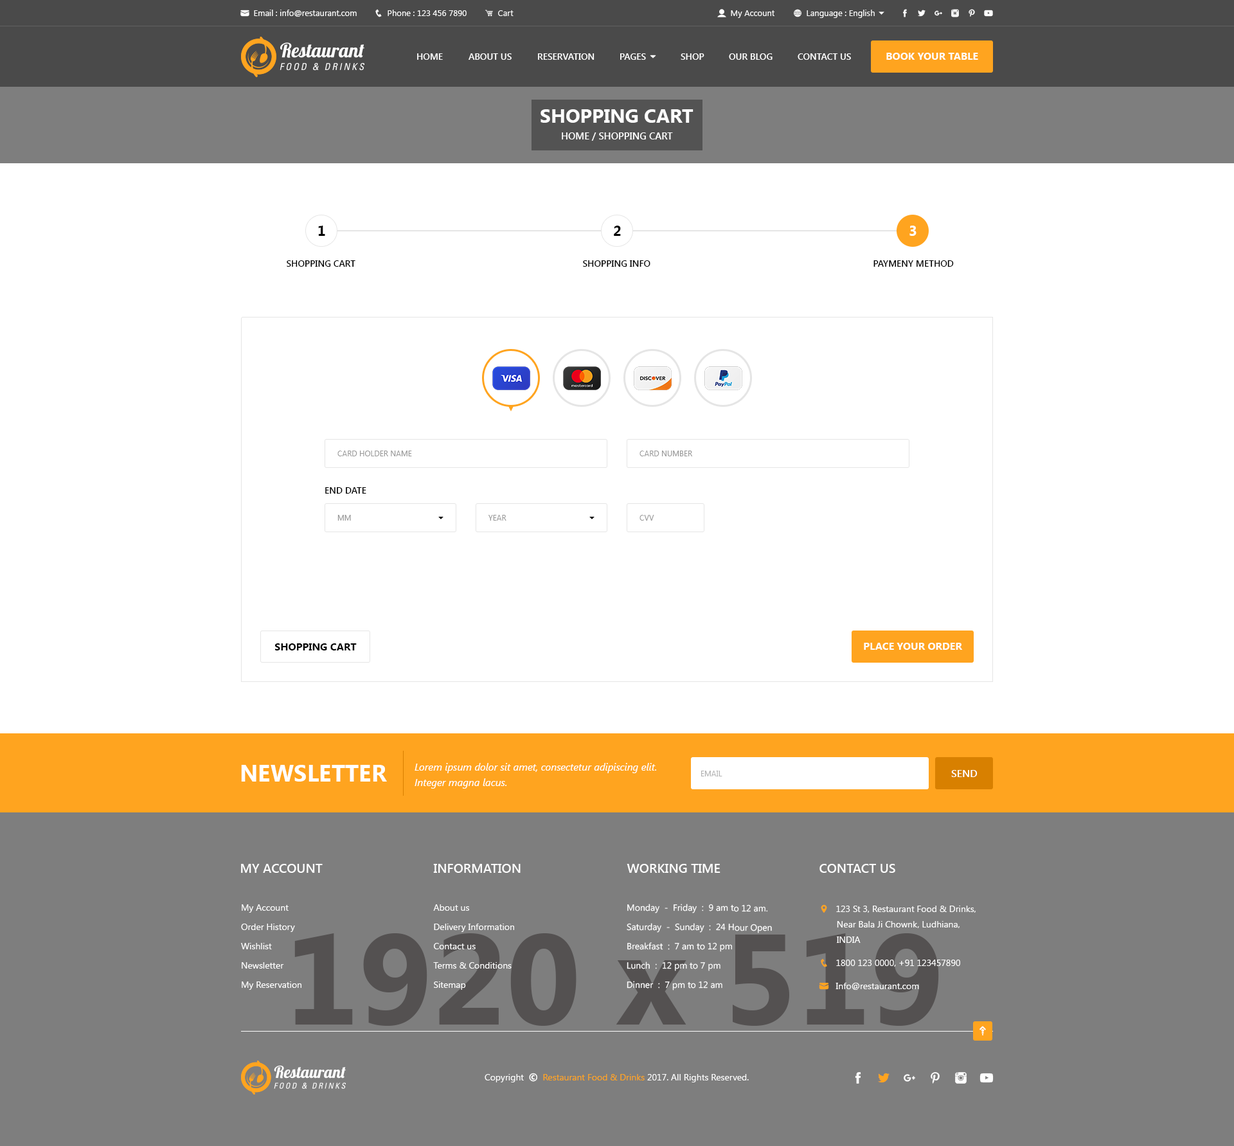
<style>
.page{position:relative;width:1234px;height:1146px;background:#ffffff}
.page>*{position:absolute;margin:0}
.t1{font:9px "SegoeUI-SemiBold";color:#ffffff}
.t2{font:10.3px "SegoeUI-Bold";color:#ffffff}
.t3{font:19.3px "SegoeUI-Bold";color:#ffffff}
.t4{font:9.6px "SegoeUI-SemiBold";color:#ffffff}
.t5{font:14.1px "SegoeUI-Bold";color:#000000}
.t6{font:14.1px "SegoeUI-Bold";color:#ffffff}
.t7{font:9px "SegoeUI-SemiBold";color:#000000}
.t8{font:7.7px "SegoeUI";color:#999999}
.t9{font:10.3px "SegoeUI-Bold";color:#000000}
.t10{font:23.1px "SegoeUI-Bold";color:#ffffff}
.t11{font:10.3px/15.4px "SegoeUI-Italic";color:#ffffff}
.t12{font:7.7px "SegoeUI";color:#b2b2b2;text-transform:uppercase}
.t13{font:10.3px "SegoeUI-SemiBold";color:#ffffff}
.t14{font:12.9px "SegoeUI-SemiBold";color:#ffffff}
.t15{font:9px/19.3px "SegoeUI";color:#ffffff}
.t16{font:128.6px "SegoeUI-Bold";color:#545151}
</style>
<div class="page">
<p class="t1" style="left:417px;top:53px;width:26px;height:7px">HOME</p>
<p class="t1" style="left:469px;top:53px;width:43px;height:7px">ABOUT US</p>
<p class="t1" style="left:538px;top:53px;width:57px;height:7px">RESERVATION</p>
<p class="t1" style="left:681px;top:53px;width:24px;height:7px">SHOP</p>
<p class="t1" style="left:729px;top:53px;width:44px;height:7px">OUR BLOG</p>
<p class="t1" style="left:798px;top:53px;width:53px;height:7px">CONTACT US</p>
<p class="t2" style="left:887px;top:53px;width:91px;height:7px">BOOK YOUR TABLE</p>
<p class="t3" style="left:541px;top:109px;width:153px;height:14px">SHOPPING CART</p>
<p class="t4" style="left:562px;top:132px;width:111px;height:9px">HOME / SHOPPING CART</p>
<p class="t5" style="left:318px;top:226px;width:7px;height:10px">1</p>
<p class="t5" style="left:614px;top:226px;width:7px;height:10px">2</p>
<p class="t6" style="left:910px;top:226px;width:7px;height:10px">3</p>
<p class="t7" style="left:287px;top:260px;width:69px;height:7px">SHOPPING CART</p>
<p class="t7" style="left:583px;top:260px;width:68px;height:7px">SHOPPING INFO</p>
<p class="t7" style="left:874px;top:260px;width:80px;height:7px">PAYMENY METHOD</p>
<p class="t8" style="left:338px;top:451px;width:74px;height:5px">CARD HOLDER NAME</p>
<p class="t8" style="left:640px;top:451px;width:53px;height:5px">CARD NUMBER</p>
<p class="t7" style="left:325px;top:487px;width:41px;height:7px">END DATE</p>
<p class="t8" style="left:338px;top:515px;width:13px;height:6px">MM</p>
<p class="t8" style="left:489px;top:515px;width:18px;height:6px">YEAR</p>
<p class="t8" style="left:640px;top:515px;width:14px;height:6px">CVV</p>
<p class="t9" style="left:275px;top:644px;width:82px;height:7px">SHOPPING CART</p>
<p class="t2" style="left:864px;top:643px;width:99px;height:7px">PLACE YOUR ORDER</p>
<p class="t10" style="left:241px;top:765px;width:146px;height:17px">NEWSLETTER</p>
<p class="t11" style="left:415px;top:763px;width:241px;height:26px">Lorem ipsum dolor sit amet, consectetur adipiscing elit. Integer magna lacus.</p>
<p class="t12" style="left:701px;top:771px;width:22px;height:6px">Email</p>
<p class="t13" style="left:951px;top:770px;width:27px;height:7px">SEND</p>
<p class="t14" style="left:241px;top:864px;width:82px;height:9px">MY ACCOUNT</p>
<p class="t14" style="left:433px;top:864px;width:88px;height:9px">INFORMATION</p>
<p class="t14" style="left:627px;top:864px;width:94px;height:9px">WORKING TIME</p>
<p class="t14" style="left:820px;top:864px;width:76px;height:9px">CONTACT US</p>
<p class="t15" style="left:241px;top:905px;width:61px;height:85px">My Account<br>Order History<br>Wishlist<br>Newsletter<br>My Reservation</p>
<p class="t15" style="left:433px;top:905px;width:81px;height:85px">About us<br>Delivery Information<br>Contact us<br>Terms &amp; Conditions<br>Sitemap</p>
<p class="t15" style="left:627px;top:904px;width:145px;height:87px">Monday  -  Friday  :  9 am to 12 am.<br>Saturday  -  Sunday  :  24 Hour Open<br>Breakfast  :  7 am to 12 pm<br>Lunch  :  12 pm to 7 pm<br>Dinner  :  7 pm to 12 am</p>
<p class="t16" style="left:294px;top:933px;width:645px;height:93px">1920 x 519</p>
</div>
